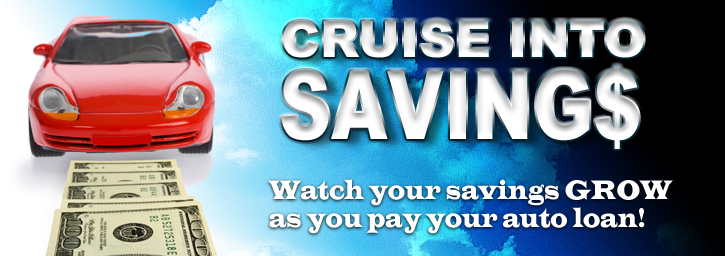
<style>
.page{position:relative;width:725px;height:256px}
.page>*{position:absolute;margin:0}
.t1{font:50px "Arial-Black";color:#ffffff}
.t2{font:94.4px "Arial-Black";color:#ffffff;scale:0.77 1}
.t3{font:27.8px/27.8px "LatinWide";color:#ffffff;scale:0.63 1}
</style>
<div class="page">
<p class="t1" style="left:283px;top:20px;width:361px;height:38px">CRUISE INTO</p>
<p class="t2" style="left:281px;top:66px;width:358px;height:83px">SAVING$</p>
<p class="t3" style="left:268px;top:179px;width:405px;height:55px">Watch your savings GROW<br>as you pay your auto loan!</p>
</div>
